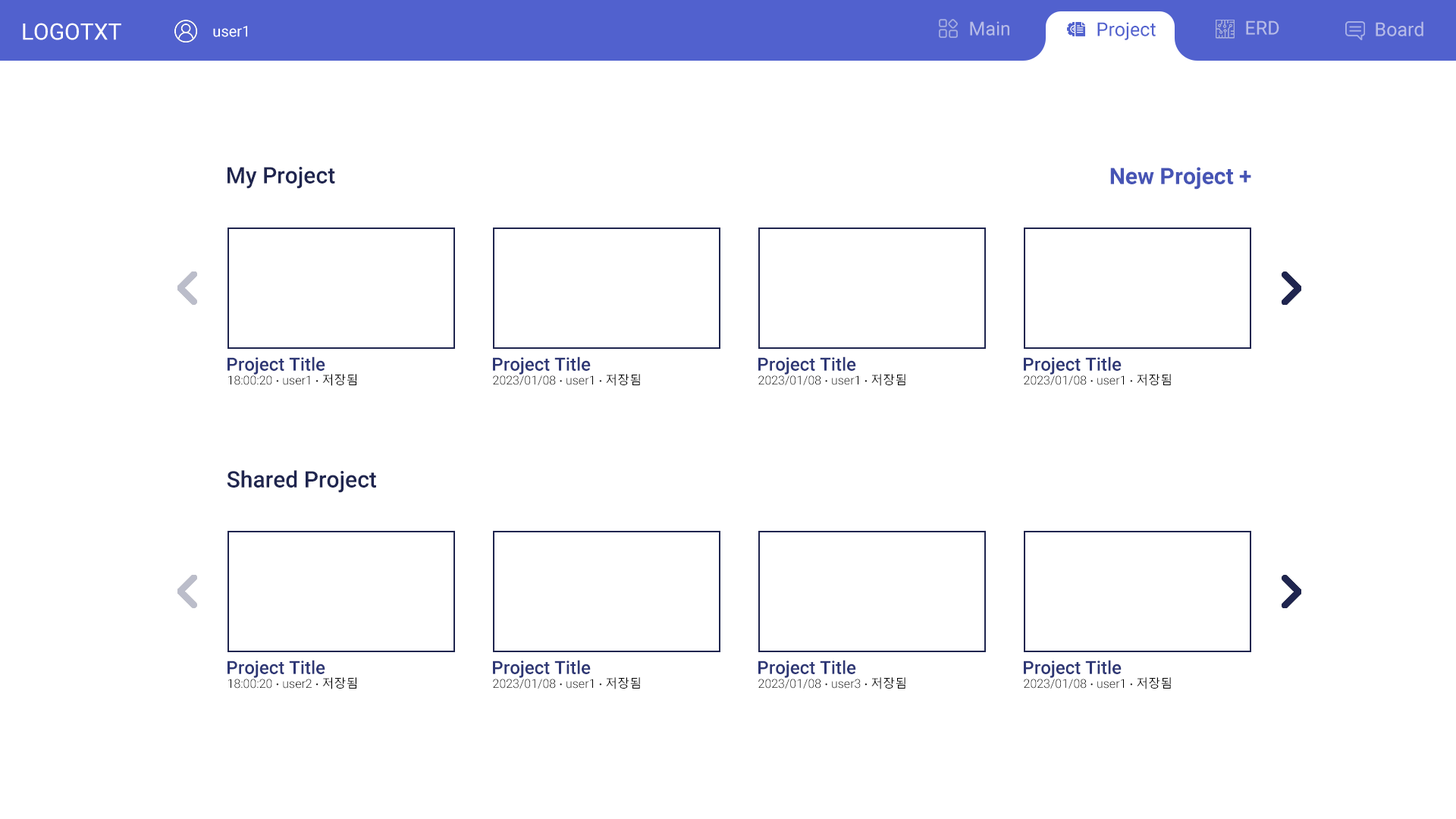
<style>
.page{position:relative;width:1456px;height:819px;background:#ffffff}
.page>*{position:absolute;margin:0}
.t1{font:22.7px "Roboto-Regular";color:#ffffff}
.t2{font:19px "Roboto-Regular";color:#b6bbe7}
.t3{font:19px "Roboto-Regular";color:#5161ce}
.t4{font:22.7px "Roboto-Medium";color:#1f254f}
.t5{font:22.7px "Roboto-Bold";color:#4755b5}
.t6{font:18.2px "Roboto-Medium";color:#2e3775}
.t7{font:12.1px "Roboto-Light";color:#000000}
.t8{font:12.1px "MalgunGothic";color:#000000}
</style>
<div class="page">
<p class="t1" style="left:23px;top:23px;width:98px;height:17px">LOGOTXT</p>
<p class="t2" style="left:970px;top:21px;width:39px;height:15px">Main</p>
<p class="t3" style="left:1097px;top:22px;width:59px;height:18px">Project</p>
<p class="t2" style="left:1246px;top:20px;width:33px;height:15px">ERD</p>
<p class="t2" style="left:1376px;top:21px;width:47px;height:15px">Board</p>
<p class="t4" style="left:227px;top:167px;width:108px;height:22px">My Project</p>
<p class="t5" style="left:1110px;top:167px;width:141px;height:23px">New Project +</p>
<p class="t6" style="left:227px;top:356px;width:98px;height:19px">Project Title</p>
<p class="t6" style="left:493px;top:356px;width:98px;height:19px">Project Title</p>
<p class="t6" style="left:758px;top:356px;width:98px;height:19px">Project Title</p>
<p class="t6" style="left:1024px;top:356px;width:98px;height:19px">Project Title</p>
<p class="t7" style="left:228px;top:374px;width:128px;height:12px">18:00:20 <span class="t8">∙</span> user1 <span class="t8">∙ 저장됨</span></p>
<p class="t7" style="left:493px;top:374px;width:147px;height:12px">2023/01/08 <span class="t8">∙</span> user1 <span class="t8">∙ 저장됨</span></p>
<p class="t7" style="left:758px;top:374px;width:147px;height:12px">2023/01/08 <span class="t8">∙</span> user1 <span class="t8">∙ 저장됨</span></p>
<p class="t7" style="left:1024px;top:374px;width:147px;height:12px">2023/01/08 <span class="t8">∙</span> user1 <span class="t8">∙ 저장됨</span></p>
<p class="t4" style="left:227px;top:470px;width:149px;height:23px">Shared Project</p>
<p class="t6" style="left:227px;top:660px;width:98px;height:18px">Project Title</p>
<p class="t6" style="left:493px;top:660px;width:98px;height:18px">Project Title</p>
<p class="t6" style="left:758px;top:660px;width:98px;height:18px">Project Title</p>
<p class="t6" style="left:1024px;top:660px;width:98px;height:18px">Project Title</p>
<p class="t7" style="left:228px;top:677px;width:128px;height:12px">18:00:20 <span class="t8">∙</span> user2 <span class="t8">∙ 저장됨</span></p>
<p class="t7" style="left:493px;top:677px;width:147px;height:12px">2023/01/08 <span class="t8">∙</span> user1 <span class="t8">∙ 저장됨</span></p>
<p class="t7" style="left:758px;top:677px;width:147px;height:12px">2023/01/08 <span class="t8">∙</span> user3 <span class="t8">∙ 저장됨</span></p>
<p class="t7" style="left:1024px;top:677px;width:147px;height:12px">2023/01/08 <span class="t8">∙</span> user1 <span class="t8">∙ 저장됨</span></p>
</div>
